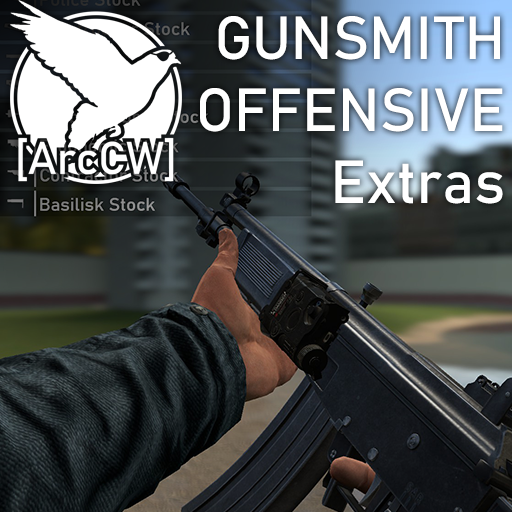
<style>
.page{position:relative;width:512px;height:512px}
.page>*{position:absolute;margin:0}
.t1{font:60px "Bahnschrift";color:#ffffff}
</style>
<div class="page">
<p class="t1" style="left:200px;top:16px;width:303px;height:188px;text-align:right">GUNSMITH<br>OFFENSIVE<br>Extras</p>
</div>
